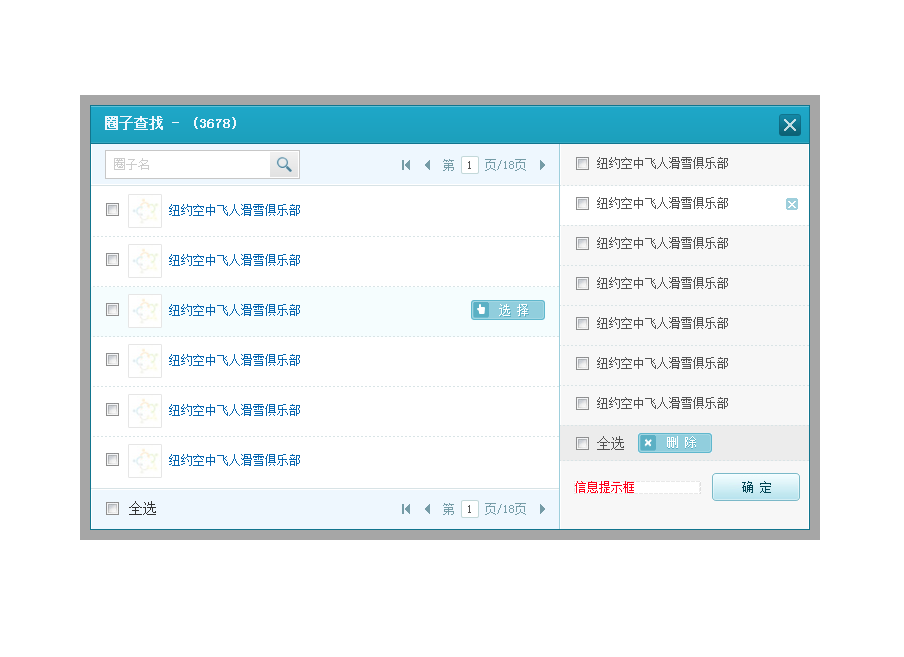
<style>
.page{position:relative;width:904px;height:657px;background:#ffffff}
.page>*{position:absolute;margin:0}
.t1{font:14px "SimSun";color:#eef7fe;font-weight:bold}
.t2{font:12px "SimSun";color:#525252}
.t3{font:12px "SimSun";color:#0666b0}
.t4{font:14px "SimSun";color:#525252}
.t5{font:14px "SimSun";color:#333333}
</style>
<div class="page">
<p class="t1" style="left:105px;top:116px;width:74px;height:14px">圈子查找 -</p>
<p class="t1" style="left:194px;top:117px;width:42px;height:12px">(3678)</p>
<p class="t2" style="left:597px;top:157px;width:131px;height:12px">纽约空中飞人滑雪俱乐部</p>
<p class="t2" style="left:597px;top:197px;width:131px;height:12px">纽约空中飞人滑雪俱乐部</p>
<p class="t3" style="left:169px;top:204px;width:131px;height:12px">纽约空中飞人滑雪俱乐部</p>
<p class="t2" style="left:597px;top:237px;width:131px;height:12px">纽约空中飞人滑雪俱乐部</p>
<p class="t3" style="left:169px;top:254px;width:131px;height:12px">纽约空中飞人滑雪俱乐部</p>
<p class="t2" style="left:597px;top:277px;width:131px;height:12px">纽约空中飞人滑雪俱乐部</p>
<p class="t3" style="left:169px;top:304px;width:131px;height:12px">纽约空中飞人滑雪俱乐部</p>
<p class="t2" style="left:597px;top:317px;width:131px;height:12px">纽约空中飞人滑雪俱乐部</p>
<p class="t3" style="left:169px;top:354px;width:131px;height:12px">纽约空中飞人滑雪俱乐部</p>
<p class="t2" style="left:597px;top:357px;width:131px;height:12px">纽约空中飞人滑雪俱乐部</p>
<p class="t2" style="left:597px;top:397px;width:131px;height:12px">纽约空中飞人滑雪俱乐部</p>
<p class="t3" style="left:169px;top:404px;width:131px;height:12px">纽约空中飞人滑雪俱乐部</p>
<p class="t4" style="left:597px;top:436px;width:27px;height:14px">全选</p>
<p class="t3" style="left:169px;top:454px;width:131px;height:12px">纽约空中飞人滑雪俱乐部</p>
<p class="t5" style="left:129px;top:501px;width:27px;height:14px">全选</p>
</div>
